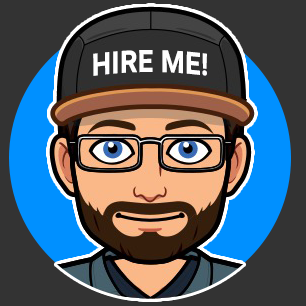
<style>
.page{position:relative;width:306px;height:306px;background:#333333}
.page>*{position:absolute;margin:0}
.t1{font:31.2px "Roboto-Bold";letter-spacing:0.02em;color:#ffffff;scale:0.83 1}
</style>
<div class="page">
<p class="t1" style="left:93px;top:50px;width:114px;height:26px">HIRE ME!</p>
</div>
